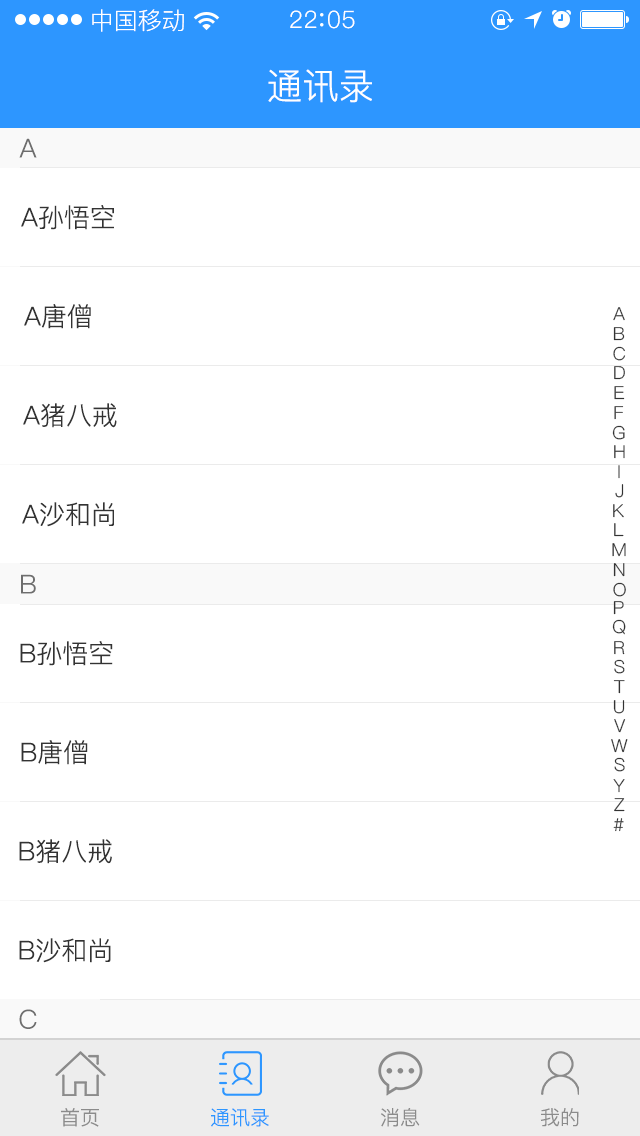
<style>
.page{position:relative;width:640px;height:1136px;background:#ffffff}
.page>*{position:absolute;margin:0}
.t1{font:24px "PingFang-SC-Regular";color:#ffffff}
.t2{font:24px "PingFang-SC-Regular";letter-spacing:0.03em;color:#ffffff}
.t3{font:36px "PingFang-SC-Regular";color:#ffffff}
.t4{font:26px "PingFang-SC-Regular";color:#6e6e6e}
.t5{font:26px "PingFang-SC-Regular";color:#333333}
.t6{font:18px "PingFang-SC-Regular";color:#333333}
.t7{font:18px "PingFang-SC-Regular"}
.t8{font:20px "PingFang-SC-Regular";color:#8b8b8b}
.t9{font:20px "PingFang-SC-Regular";color:#2d96ff}
</style>
<div class="page">
<p class="t1" style="left:92px;top:9px;width:92px;height:23px">中国移动</p>
<p class="t2" style="left:290px;top:10px;width:65px;height:19px">22 05</p>
<p class="t3" style="left:268px;top:69px;width:104px;height:34px">通讯录</p>
<p class="t4" style="left:19px;top:138px;width:18px;height:20px">A</p>
<p class="t5" style="left:21px;top:205px;width:93px;height:25px">A孙悟空</p>
<p class="t5" style="left:24px;top:304px;width:67px;height:25px">A唐僧</p>
<p class="t6" style="left:613px;top:307px;width:12px;height:14px">A</p>
<p class="t6" style="left:613px;top:327px;width:12px;height:14px">B</p>
<p class="t6" style="left:613px;top:346px;width:13px;height:15px">C</p>
<p class="t6" style="left:614px;top:366px;width:11px;height:14px">D</p>
<p class="t6" style="left:614px;top:386px;width:11px;height:14px">E</p>
<p class="t5" style="left:23px;top:403px;width:94px;height:25px">A猪八戒</p>
<p class="t7" style="left:614px;top:406px;width:10px;height:14px">F</p>
<p class="t6" style="left:612px;top:425px;width:13px;height:15px">G</p>
<p class="t7" style="left:614px;top:445px;width:11px;height:14px">H</p>
<p class="t7" style="left:618px;top:465px;width:2px;height:14px">I</p>
<p class="t6" style="left:615px;top:484px;width:9px;height:14px">J</p>
<p class="t5" style="left:22px;top:502px;width:92px;height:25px">A沙和尚</p>
<p class="t6" style="left:613px;top:504px;width:11px;height:14px">K</p>
<p class="t6" style="left:614px;top:523px;width:10px;height:14px">L</p>
<p class="t6" style="left:612px;top:543px;width:14px;height:14px">M</p>
<p class="t6" style="left:613px;top:563px;width:12px;height:14px">N</p>
<p class="t4" style="left:21px;top:574px;width:15px;height:20px">B</p>
<p class="t6" style="left:613px;top:582px;width:13px;height:15px">O</p>
<p class="t6" style="left:613px;top:601px;width:11px;height:14px">P</p>
<p class="t6" style="left:612px;top:619px;width:14px;height:16px">Q</p>
<p class="t5" style="left:20px;top:641px;width:93px;height:25px">B孙悟空</p>
<p class="t6" style="left:614px;top:641px;width:11px;height:14px">R</p>
<p class="t6" style="left:614px;top:659px;width:11px;height:15px">S</p>
<p class="t6" style="left:613px;top:680px;width:12px;height:14px">T</p>
<p class="t6" style="left:613px;top:700px;width:12px;height:14px">U</p>
<p class="t6" style="left:614px;top:719px;width:12px;height:14px">V</p>
<p class="t5" style="left:21px;top:740px;width:67px;height:25px">B唐僧</p>
<p class="t6" style="left:611px;top:739px;width:17px;height:14px">W</p>
<p class="t6" style="left:614px;top:757px;width:11px;height:15px">S</p>
<p class="t6" style="left:613px;top:779px;width:12px;height:14px">Y</p>
<p class="t6" style="left:614px;top:798px;width:11px;height:14px">Z</p>
<p class="t6" style="left:613px;top:818px;width:11px;height:14px">#</p>
<p class="t5" style="left:19px;top:839px;width:93px;height:25px">B猪八戒</p>
<p class="t5" style="left:19px;top:938px;width:92px;height:25px">B沙和尚</p>
<p class="t4" style="left:19px;top:1009px;width:18px;height:20px">C</p>
<p class="t8" style="left:61px;top:1108px;width:38px;height:19px">首页</p>
<p class="t9" style="left:211px;top:1108px;width:58px;height:19px">通讯录</p>
<p class="t8" style="left:381px;top:1108px;width:39px;height:19px">消息</p>
<p class="t8" style="left:540px;top:1108px;width:39px;height:19px">我的</p>
</div>
